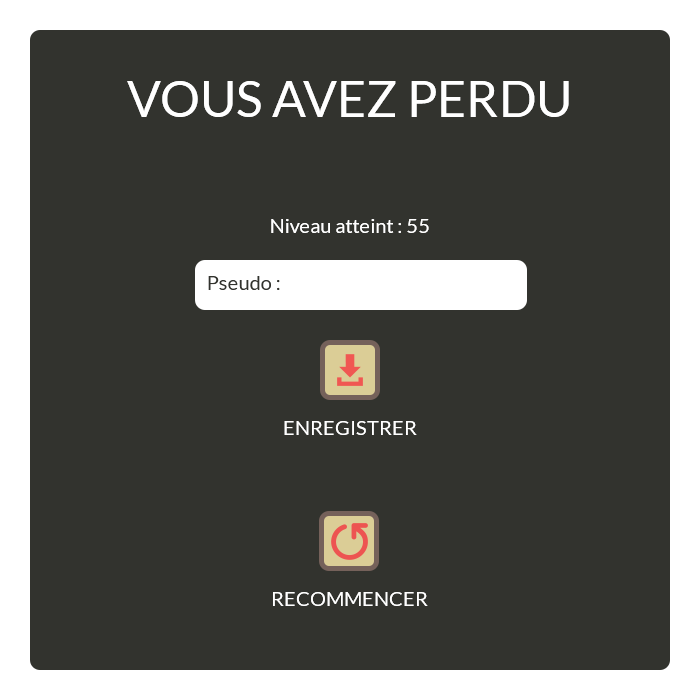
<style>
.page{position:relative;width:700px;height:700px;background:#32332e}
.page>*{position:absolute;margin:0}
.t1{font:50px "Lato-Regular";color:#ffffff}
.t2{font:20px "Lato-Regular";color:#ffffff}
.t3{font:20px "Lato-Regular";color:#32332e}
</style>
<div class="page">
<p class="t1" style="left:127px;top:81px;width:442px;height:36px">VOUS AVEZ PERDU</p>
<p class="t2" style="left:271px;top:219px;width:158px;height:14px">Niveau atteint : 55</p>
<p class="t3" style="left:208px;top:276px;width:72px;height:14px">Pseudo :</p>
<p class="t2" style="left:284px;top:421px;width:133px;height:14px">ENREGISTRER</p>
<p class="t2" style="left:273px;top:592px;width:155px;height:14px">RECOMMENCER</p>
</div>
